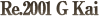
<style>
.page{position:relative;width:106px;height:18px;background:#ffffff}
.page>*{position:absolute;margin:0}
.t1{font:18px "RyuminPro-ExBold";letter-spacing:-0.08em;color:#4a3f32;font-weight:bold;scale:0.9 1}
</style>
<div class="page">
<p class="t1" style="left:0px;top:0px;width:99px;height:16px">Re.2001 G Kai</p>
</div>
